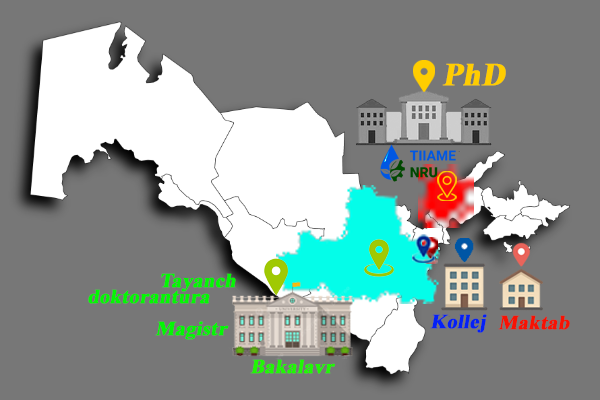
<style>
.page{position:relative;width:600px;height:400px;background:#777777}
.page>*{position:absolute;margin:0}
.t1{font:32px "TimesNewRomanPS-BoldMT";color:#ffcd00;font-weight:bold;font-style:italic}
.t2{font:20px/16px "TimesNewRomanPS-BoldMT";color:#03f703;font-weight:bold;font-style:italic}
.t3{font:20px/16px "TimesNewRomanPS-BoldMT";color:#f71203;font-weight:bold;font-style:italic}
.t4{font:20px "TimesNewRomanPS-BoldMT";color:#0320f7;font-weight:bold;font-style:italic}
.t5{font:20px "TimesNewRomanPS-BoldMT";color:#f71203;font-weight:bold;font-style:italic}
.t6{font:20px "TimesNewRomanPS-BoldMT";color:#03f703;font-weight:bold;font-style:italic}
.t7{font:20px "TimesNewRomanPS-BoldMT";color:#20f703;font-weight:bold;font-style:italic}
</style>
<div class="page">
<p class="t1" style="left:442px;top:63px;width:64px;height:23px">PhD</p>
<p class="t2" style="left:88px;top:273px;width:148px;height:31px"><span class="t3">   </span>Tayanch <br>doktorantura</p>
<p class="t4" style="left:430px;top:314px;width:57px;height:19px">Kollej</p>
<p class="t5" style="left:498px;top:315px;width:72px;height:15px">Maktab</p>
<p class="t6" style="left:155px;top:321px;width:74px;height:19px">Magistr</p>
<p class="t7" style="left:250px;top:359px;width:85px;height:15px">Bakalavr</p>
</div>
